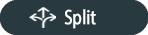
<style>
.page{position:relative;width:148px;height:35px;background:#283a40}
.page>*{position:absolute;margin:0}
.t1{font:20.6px "MyriadPro-Regular";color:#ffffff;font-weight:bold;scale:0.78 1}
</style>
<div class="page">
<p class="t1" style="left:64px;top:9px;width:32px;height:20px">Split</p>
</div>
